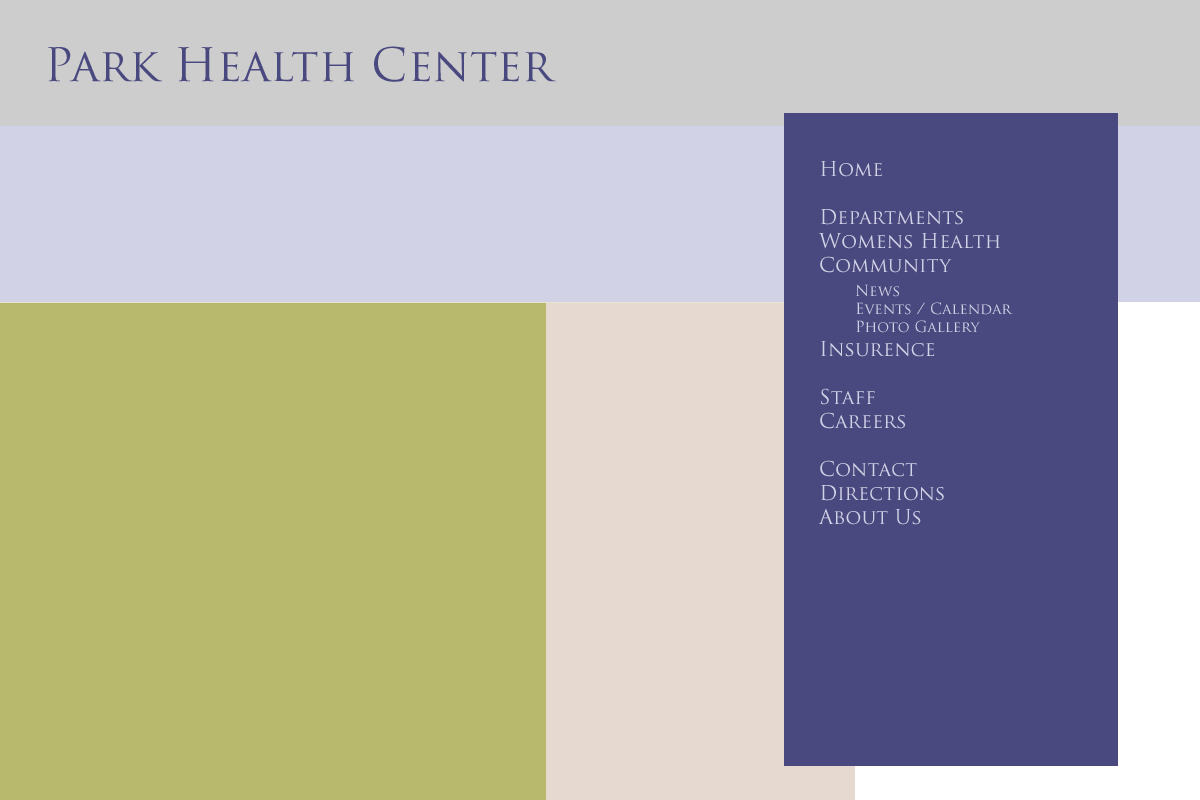
<style>
.page{position:relative;width:1200px;height:800px;background:#b9b96e}
.page>*{position:absolute;margin:0}
.t1{font:45px "TrajanPro-Regular";color:#494980}
.t2{font:20px "TrajanPro-Regular";color:#d2d2e6}
.t3{font:15px "TrajanPro-Regular";color:#d2d2e6}
</style>
<div class="page">
<p class="t1" style="left:48px;top:46px;width:508px;height:36px">Park Health Center</p>
<p class="t2" style="left:818px;top:161px;width:195px;height:364px">Home<br><br>Departments<br>Womens Health<br>Community<br> <span class="t3">News<br> Events / Calendar<br> Photo Gallery<br></span>Insurence<br><br>Staff<br>Careers<br><br>Contact<br>Directions<br>About Us</p>
</div>
